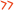
<style>
.page{position:relative;width:14px;height:10px;background:#ffffff}
.page>*{position:absolute;margin:0}
.t1{font:16px "ThrowMyHandsUpintheAir";color:#ea451e;text-transform:uppercase}
</style>
<div class="page">
<p class="t1" style="left:0px;top:0px;width:14px;height:10px">&gt;&gt;</p>
</div>
